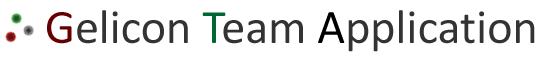
<style>
.page{position:relative;width:540px;height:60px;background:#ffffff}
.page>*{position:absolute;margin:0}
.t1{font:48px "Calibri";color:#333333}
.t2{font:48px "Calibri";color:#660000}
.t3{font:48px "Calibri";color:#006633}
.t4{font:48px "Calibri";color:#000000}
</style>
<div class="page">
<p class="t1" style="left:47px;top:10px;width:488px;height:42px"><span class="t2">G</span>elicon <span class="t3">T</span>eam <span class="t4">A</span>pplication</p>
</div>
